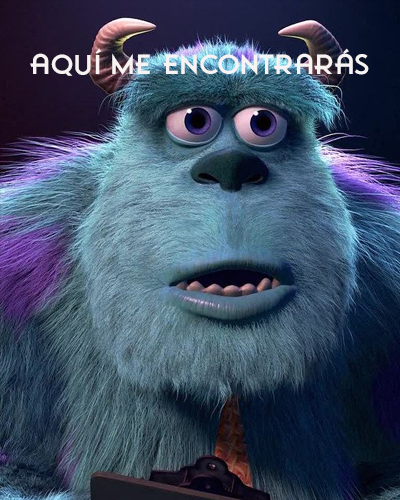
<style>
.page{position:relative;width:400px;height:500px}
.page>*{position:absolute;margin:0}
.t1{font:26px "FilmNoirAdventure";letter-spacing:0.025em;color:#f7f3f3;scale:1.05 1}
</style>
<div class="page">
<p class="t1" style="left:30px;top:48px;width:339px;height:28px">AQUÍ ME ENCONTRARÁS</p>
</div>
